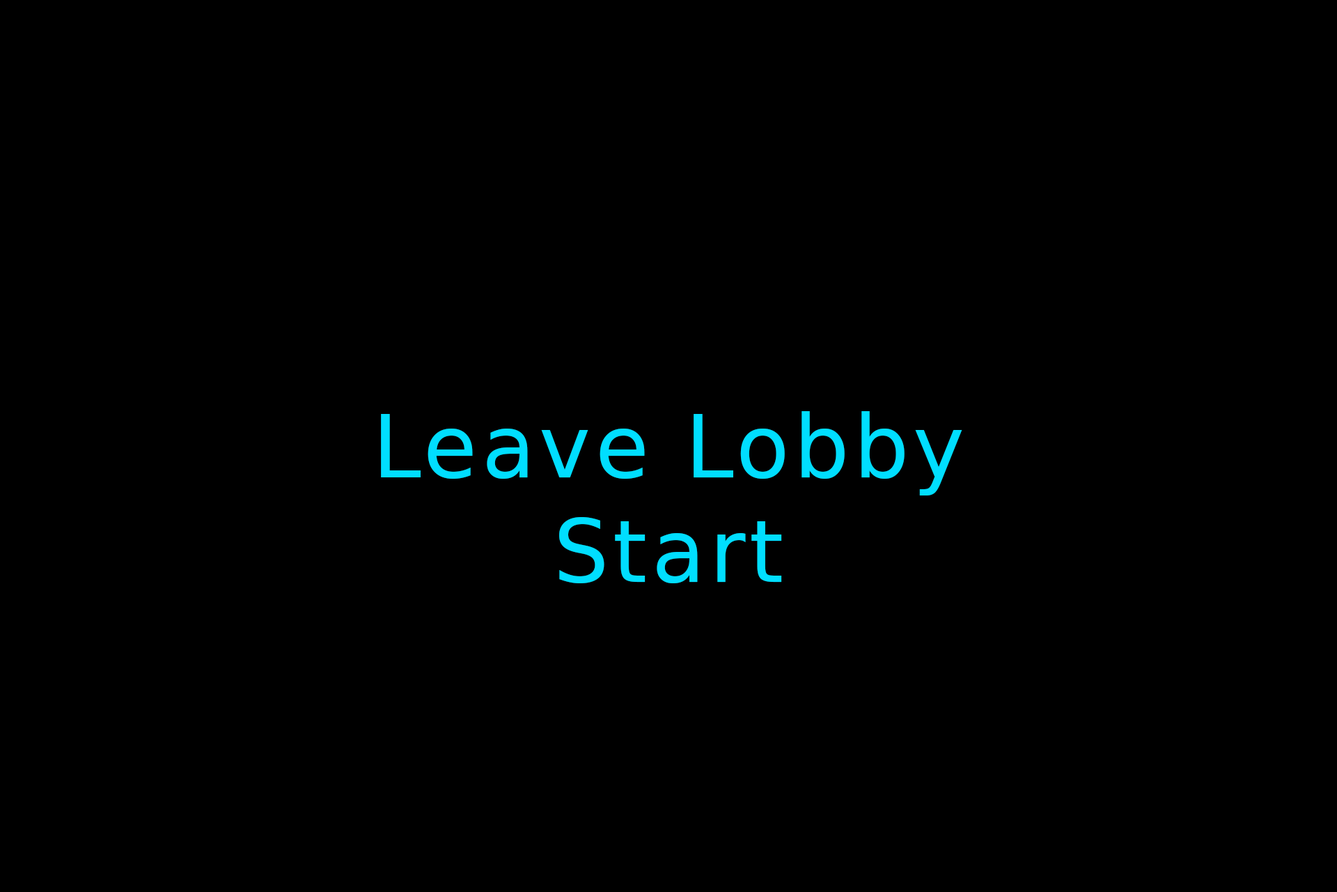
<style>
.page{position:relative;width:1337px;height:892px;background:#000000}
.page>*{position:absolute;margin:0}
.t1{font:87.1px "BitstreamVeraSans-Roman";letter-spacing:0.05em;color:#00deff}
</style>
<div class="page">
<p class="t1" style="left:381px;top:411px;width:582px;height:84px">Leave Lobby</p>
<p class="t1" style="left:559px;top:517px;width:223px;height:66px">Start</p>
</div>
